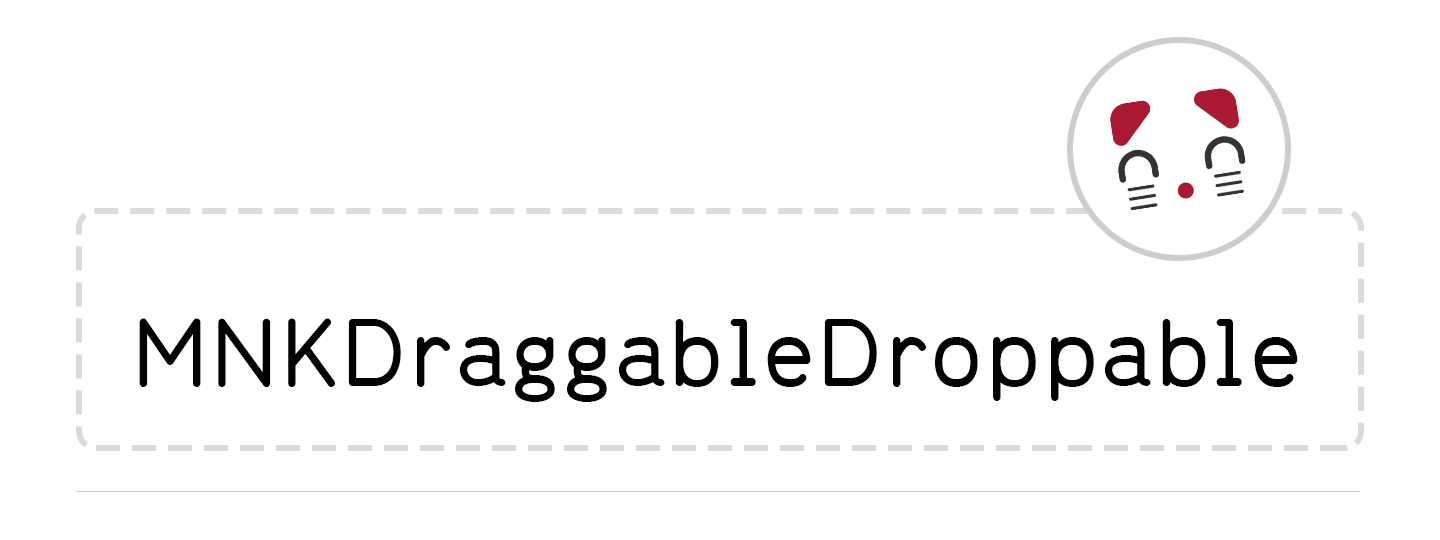
<style>
.page{position:relative;width:1440px;height:540px;background:#ffffff}
.page>*{position:absolute;margin:0}
.t1{font:91.6px "Range";color:#000000}
</style>
<div class="page">
<p class="t1" style="left:139px;top:318px;width:1159px;height:84px">MNKDraggableDroppable</p>
</div>
